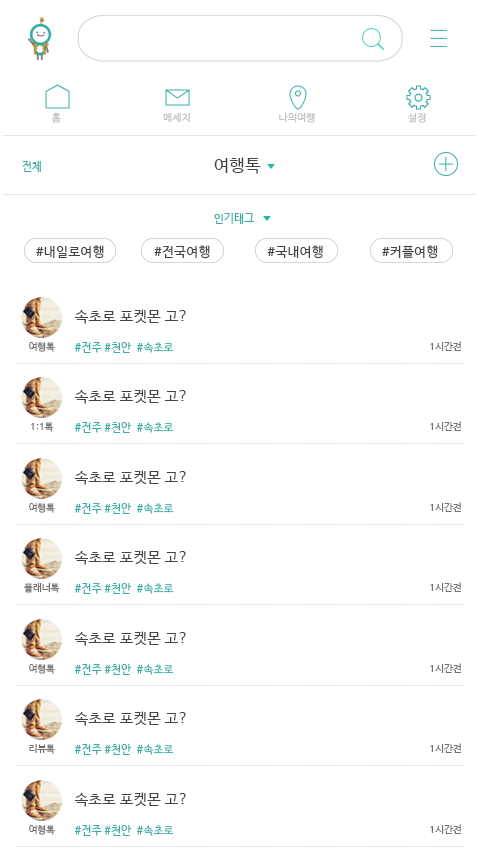
<style>
.page{position:relative;width:480px;height:850px;background:#ffffff}
.page>*{position:absolute;margin:0}
.t1{font:10px "NanumBarunGothic";letter-spacing:0.025em;color:#bfbfbf}
.t2{font:11px "NanumBarunGothic";letter-spacing:0.025em;color:#36ada4}
.t3{font:17px "NanumBarunGothic";letter-spacing:0.025em;color:#434343}
.t4{font:13.1px "NanumBarunGothic";letter-spacing:0.025em;color:#434343}
.t5{font:15px "NanumBarunGothic";letter-spacing:0.025em;color:#434343}
.t6{font:9.6px "NanumBarunGothic";letter-spacing:0.025em;color:#707070}
</style>
<div class="page">
<p class="t1" style="left:51px;top:112px;width:11px;height:11px">홈</p>
<p class="t1" style="left:163px;top:113px;width:27px;height:9px">메세지</p>
<p class="t1" style="left:279px;top:112px;width:36px;height:11px">나의여행</p>
<p class="t1" style="left:408px;top:113px;width:18px;height:10px">설정</p>
<p class="t2" style="left:22px;top:161px;width:19px;height:11px">전체</p>
<p class="t3" style="left:214px;top:157px;width:47px;height:17px">여행톡</p>
<p class="t2" style="left:214px;top:213px;width:40px;height:11px">인기태그</p>
<p class="t4" style="left:36px;top:245px;width:68px;height:14px">#내일로여행</p>
<p class="t4" style="left:154px;top:245px;width:56px;height:14px">#전국여행</p>
<p class="t4" style="left:267px;top:245px;width:56px;height:14px">#국내여행</p>
<p class="t4" style="left:382px;top:245px;width:56px;height:14px">#커플여행</p>
<p class="t5" style="left:74px;top:309px;width:112px;height:15px">속초로 포켓몬 고?</p>
<p class="t6" style="left:29px;top:342px;width:26px;height:10px">여행톡</p>
<p class="t2" style="left:74px;top:342px;width:100px;height:11px">#전주 #천안  #속초로</p>
<p class="t6" style="left:430px;top:341px;width:31px;height:10px">1시간전</p>
<p class="t5" style="left:74px;top:389px;width:112px;height:15px">속초로 포켓몬 고?</p>
<p class="t6" style="left:31px;top:422px;width:23px;height:10px">1:1톡</p>
<p class="t2" style="left:74px;top:422px;width:100px;height:11px">#전주 #천안  #속초로</p>
<p class="t6" style="left:430px;top:421px;width:31px;height:10px">1시간전</p>
<p class="t5" style="left:74px;top:470px;width:112px;height:15px">속초로 포켓몬 고?</p>
<p class="t6" style="left:29px;top:503px;width:26px;height:10px">여행톡</p>
<p class="t2" style="left:74px;top:503px;width:100px;height:11px">#전주 #천안  #속초로</p>
<p class="t6" style="left:430px;top:502px;width:31px;height:10px">1시간전</p>
<p class="t5" style="left:74px;top:550px;width:112px;height:15px">속초로 포켓몬 고?</p>
<p class="t6" style="left:430px;top:582px;width:31px;height:10px">1시간전</p>
<p class="t6" style="left:24px;top:583px;width:36px;height:10px">플래너톡</p>
<p class="t2" style="left:74px;top:583px;width:100px;height:11px">#전주 #천안  #속초로</p>
<p class="t5" style="left:74px;top:631px;width:112px;height:15px">속초로 포켓몬 고?</p>
<p class="t6" style="left:29px;top:664px;width:26px;height:10px">여행톡</p>
<p class="t2" style="left:74px;top:664px;width:100px;height:11px">#전주 #천안  #속초로</p>
<p class="t6" style="left:430px;top:663px;width:31px;height:10px">1시간전</p>
<p class="t5" style="left:74px;top:711px;width:112px;height:15px">속초로 포켓몬 고?</p>
<p class="t6" style="left:29px;top:744px;width:26px;height:10px">리뷰톡</p>
<p class="t2" style="left:74px;top:744px;width:100px;height:11px">#전주 #천안  #속초로</p>
<p class="t6" style="left:430px;top:743px;width:31px;height:10px">1시간전</p>
<p class="t5" style="left:74px;top:792px;width:112px;height:15px">속초로 포켓몬 고?</p>
<p class="t6" style="left:29px;top:825px;width:26px;height:10px">여행톡</p>
<p class="t2" style="left:74px;top:825px;width:100px;height:11px">#전주 #천안  #속초로</p>
<p class="t6" style="left:430px;top:824px;width:31px;height:10px">1시간전</p>
</div>
